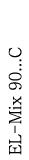
<style>
.page{position:relative;width:29px;height:160px;background:#ffffff}
.page>*{position:absolute;margin:0}
.t1{font:16.7px "Batang";color:#000000;scale:0.95 1}
</style>
<div class="page">
<p class="t1" style="left:8px;top:47px;width:14px;height:108px;rotate:180deg">EL-Mix 90...C</p>
</div>
